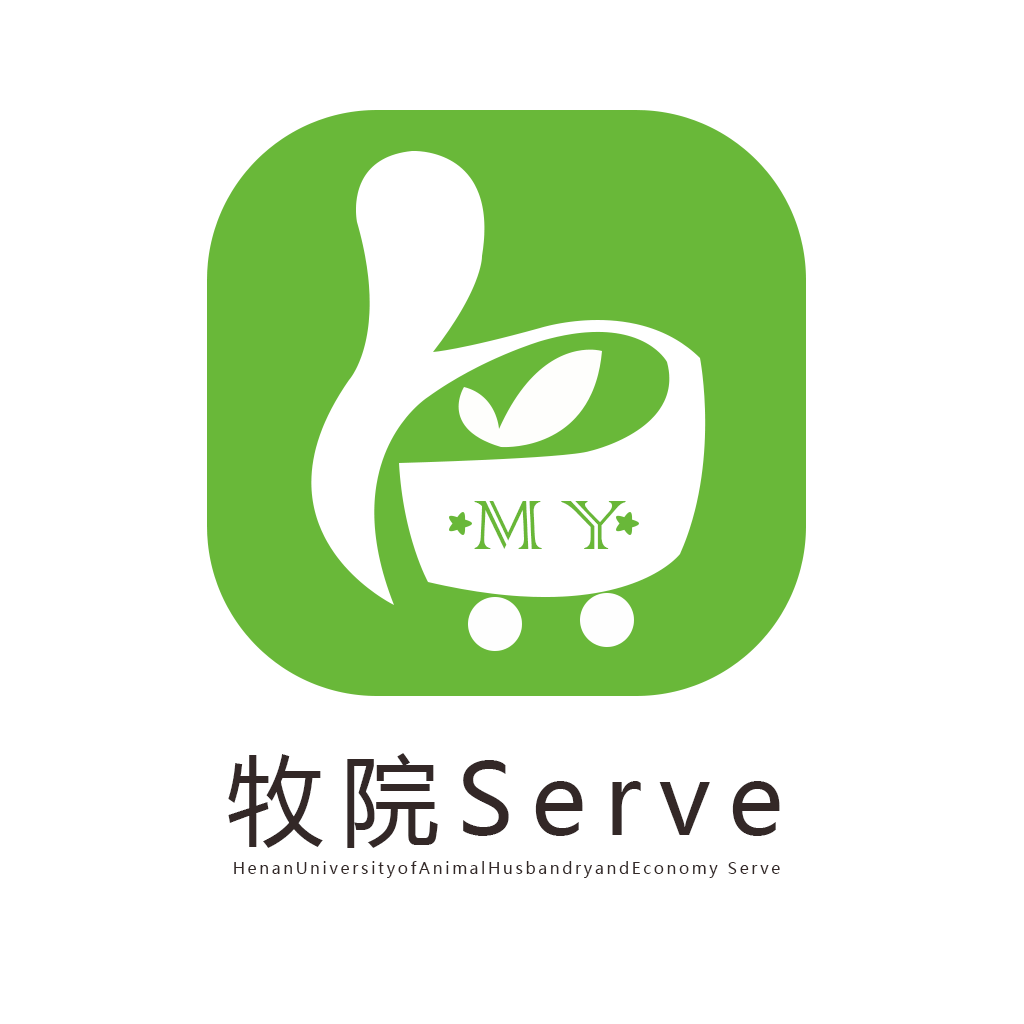
<style>
.page{position:relative;width:1024px;height:1024px;background:#ffffff}
.page>*{position:absolute;margin:0}
.t1{font:93.1px "ColonnaMT";letter-spacing:0.18em;color:#69b737}
.t2{font:97.9px "MicrosoftYaHei";letter-spacing:0.18em;color:#332827}
.t3{font:15.6px "MicrosoftYaHei";letter-spacing:0.18em;color:#332827}
</style>
<div class="page">
<p class="t1" style="left:474px;top:501px;width:152px;height:48px">MY</p>
<p class="t2" style="left:228px;top:753px;width:552px;height:95px">牧院Serve</p>
<p class="t3" style="left:234px;top:861px;width:546px;height:17px">HenanUniversityofAnimalHusbandryandEconomy Serve</p>
</div>
